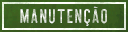
<style>
.page{position:relative;width:128px;height:32px}
.page>*{position:absolute;margin:0}
.t1{font:18.7px "HillstownCondensedClean";letter-spacing:0.1em;text-transform:uppercase}
</style>
<div class="page">
<p class="t1" style="left:20px;top:6px;width:87px;height:20px">MANUTENÇÃO</p>
</div>
